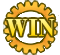
<style>
.page{position:relative;width:60px;height:55px;background:#ffffff}
.page>*{position:absolute;margin:0}
.t1{font:22px "RyuminPro-Ultra"}
</style>
<div class="page">
<p class="t1" style="left:6px;top:19px;width:49px;height:17px">WIN</p>
</div>
